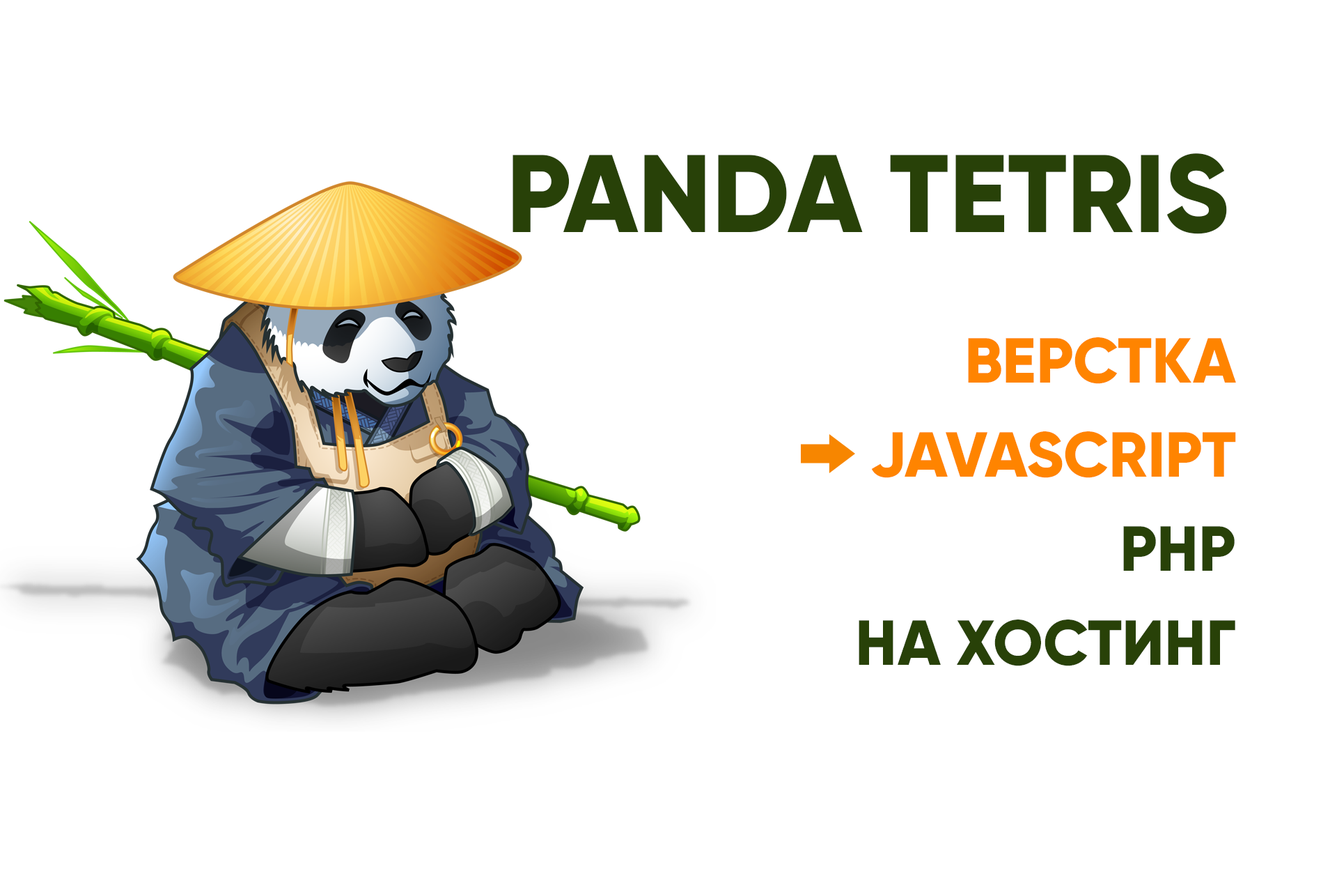
<style>
.page{position:relative;width:1337px;height:892px;background:#ffffff}
.page>*{position:absolute;margin:0}
.t1{font:110.1px "Gilroy-ExtraBold";color:#284108;text-transform:uppercase}
.t2{font:63.4px/94px "Gilroy-ExtraBold";color:#ff8400;text-transform:uppercase}
.t3{font:63.4px/94px "Gilroy-ExtraBold";color:#284108;text-transform:uppercase}
</style>
<div class="page">
<p class="t1" style="left:513px;top:153px;width:714px;height:81px">Panda Tetris</p>
<p class="t2" style="left:859px;top:337px;width:377px;height:329px;text-align:right">верстка<br>JavaScript<br><span class="t3">PHP<br>на хостинг</span></p>
</div>
